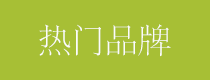
<style>
.page{position:relative;width:210px;height:80px;background:#a7bf35}
.page>*{position:absolute;margin:0}
.t1{font:33.3px "FZSYJW--GB1-0";color:#fcfcfc}
</style>
<div class="page">
<p class="t1" style="left:39px;top:24px;width:132px;height:33px">热门品牌</p>
</div>
